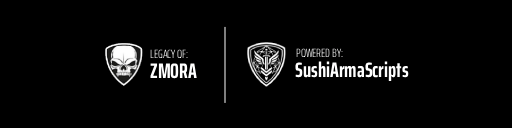
<style>
.page{position:relative;width:512px;height:128px;background:#000000}
.page>*{position:absolute;margin:0}
.t1{font:12px "SairaExtraCondensed-Light";color:#ffffff}
.t2{font:21px "SairaExtraCondensed-Bold";color:#ffffff}
</style>
<div class="page">
<p class="t1" style="left:150px;top:49px;width:38px;height:10px">LEGACY OF:</p>
<p class="t1" style="left:296px;top:48px;width:47px;height:10px">POWERED BY:</p>
<p class="t2" style="left:150px;top:63px;width:47px;height:16px">ZMORA</p>
<p class="t2" style="left:295px;top:61px;width:114px;height:21px">SushiArmaScripts</p>
</div>
